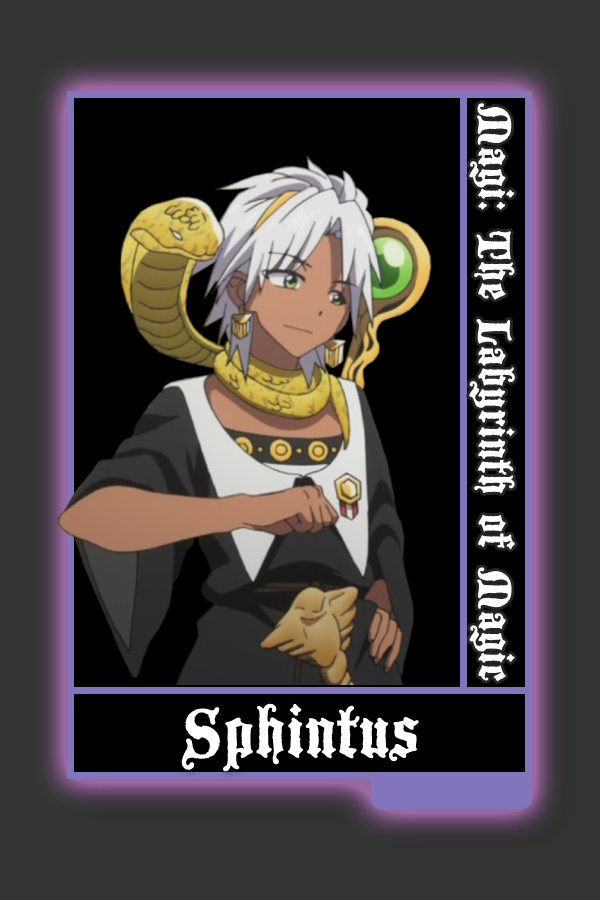
<style>
.page{position:relative;width:600px;height:900px;background:#000000}
.page>*{position:absolute;margin:0}
.t1{font:50px "BlackwoodCastle";color:#ffffff}
.t2{font:75px "BlackwoodCastle";color:#ffffff}
</style>
<div class="page">
<p class="t1" style="left:469px;top:103px;width:46px;height:579px;rotate:90deg">Magi: The Labyrinth of Magic</p>
<p class="t2" style="left:181px;top:703px;width:238px;height:69px">Sphintus</p>
</div>
